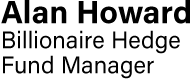
<style>
.page{position:relative;width:193px;height:80px;background:#ffffff}
.page>*{position:absolute;margin:0}
.t1{font:24px/25px "AcuminPro-Regular";color:#000000}
.t2{font:32px/42.9px "AcuminPro-Bold";color:#000000}
</style>
<div class="page">
<p class="t1" style="left:1px;top:0px;width:189px;height:79px"><span class="t2">Alan Howard<br></span>Billionaire Hedge<br>Fund Manager</p>
</div>
